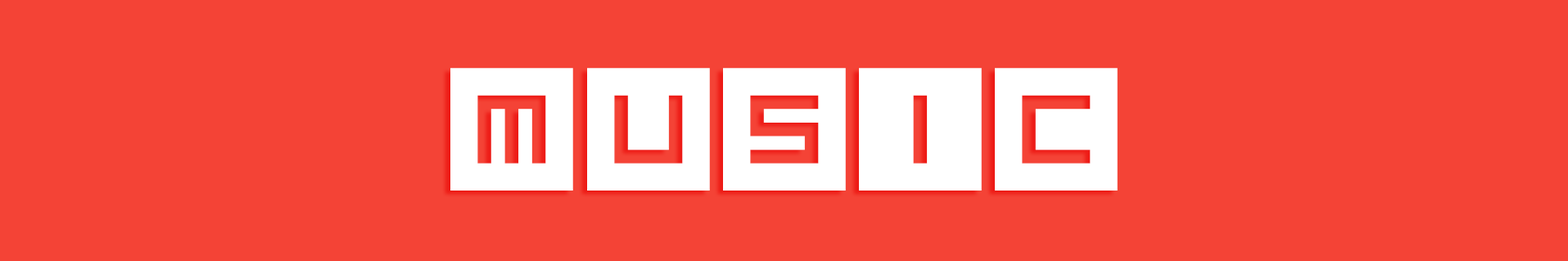
<style>
.page{position:relative;width:1568px;height:261px;background:#f44336}
.page>*{position:absolute;margin:0}
.t1{font:217.8px "Inversionz";color:#ffffff}
</style>
<div class="page">
<p class="t1" style="left:450px;top:68px;width:668px;height:123px">music</p>
</div>
